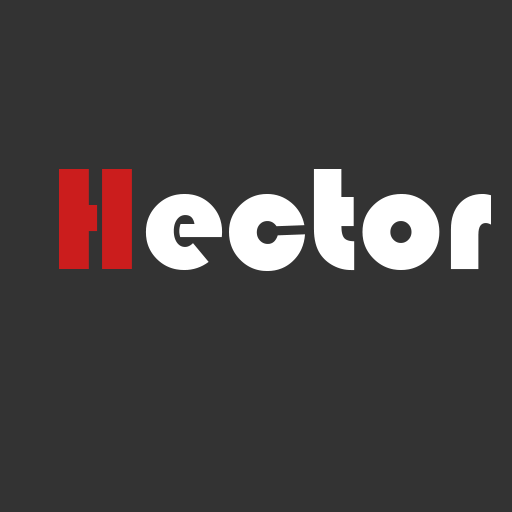
<style>
.page{position:relative;width:512px;height:512px;background:#333333}
.page>*{position:absolute;margin:0}
.t1{font:150px "Bauhaus93";color:#ffffff}
.t2{font:150px "Bauhaus93";color:#cb1d1d}
</style>
<div class="page">
<p class="t1" style="left:59px;top:169px;width:432px;height:102px"><span class="t2">H</span>ector</p>
</div>
